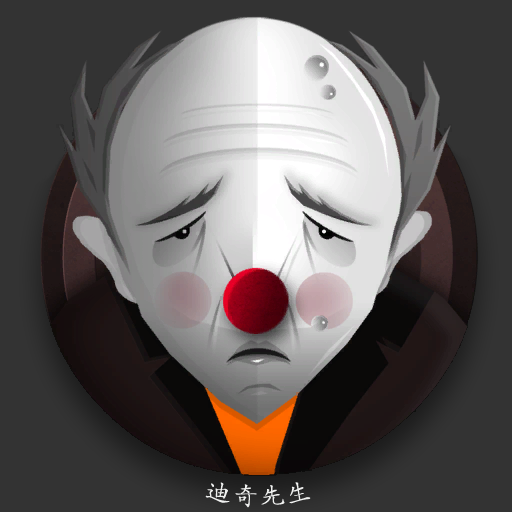
<style>
.page{position:relative;width:512px;height:512px;background:#333333}
.page>*{position:absolute;margin:0}
.t1{font:24px "STKaiti";letter-spacing:0.05em;color:#eff0ef}
</style>
<div class="page">
<p class="t1" style="left:205px;top:482px;width:106px;height:26px">迪奇先生</p>
</div>
